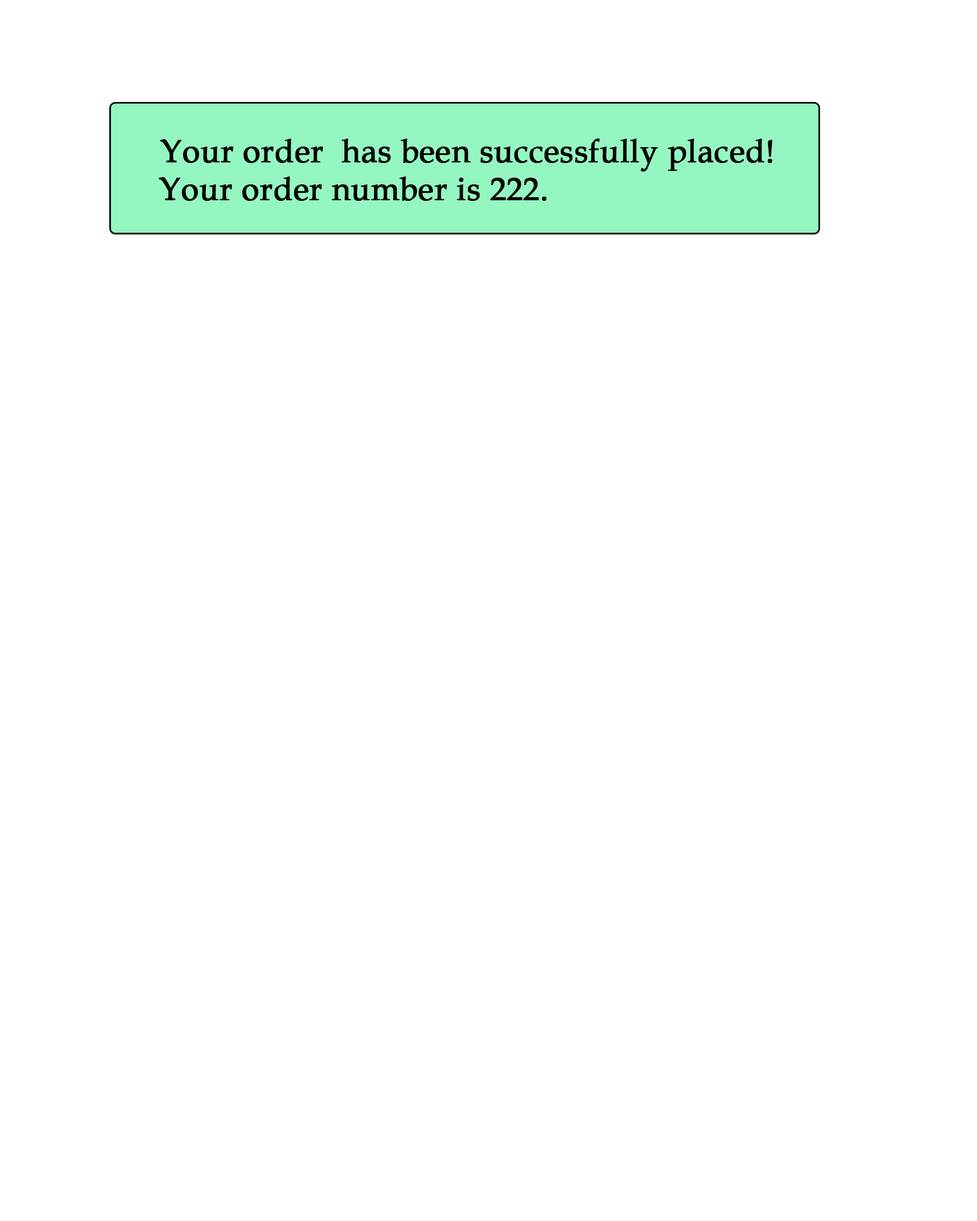
<style>
.page{position:relative;width:977px;height:1221px;background:#ffffff}
.page>*{position:absolute;margin:0}
.t1{font:31.7px "BookAntiqua";color:#000000;font-weight:bold}
</style>
<div class="page">
<p class="t1" style="left:159px;top:139px;width:613px;height:62px">Your order  has been successfully placed!<br>Your order number is 222.</p>
</div>
